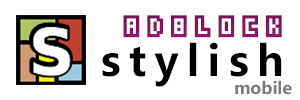
<style>
.page{position:relative;width:300px;height:100px;background:#ffffff}
.page>*{position:absolute;margin:0}
.t1{font:25px "GrixelAcme5CompCapsO";letter-spacing:0.2em;color:#891264}
.t2{font:41.7px "MicrosoftYaHei-Bold";letter-spacing:0.2em;color:#000000}
.t3{font:16.7px "MicrosoftYaHei-Bold";color:#7b7b7b}
</style>
<div class="page">
<p class="t1" style="left:123px;top:15px;width:159px;height:23px">adblock</p>
<p class="t2" style="left:102px;top:42px;width:180px;height:45px">stylish</p>
<p class="t3" style="left:235px;top:80px;width:57px;height:15px">mobile</p>
</div>
